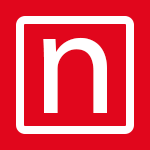
<style>
.page{position:relative;width:150px;height:150px;background:#e1061c}
.page>*{position:absolute;margin:0}
.t1{font:152.8px "MyriadPro-Regular";color:#ffffff}
</style>
<div class="page">
<p class="t1" style="left:43px;top:37px;width:64px;height:76px">n</p>
</div>
